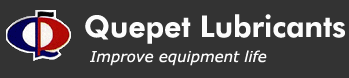
<style>
.page{position:relative;width:349px;height:78px;background:#333333}
.page>*{position:absolute;margin:0}
.t1{font:30px "FuturaBT-Heavy";color:#fcfcfc}
.t2{font:15px "Verdana-Italic";color:#fcfcfc}
</style>
<div class="page">
<p class="t1" style="left:85px;top:14px;width:260px;height:30px">Quepet Lubricants</p>
<p class="t2" style="left:90px;top:50px;width:177px;height:16px">Improve equipment life</p>
</div>
